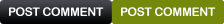
<style>
.page{position:relative;width:224px;height:24px;background:#74890b}
.page>*{position:absolute;margin:0}
.t1{font:12px "ArialRoundedMTBold";letter-spacing:-0.025em;color:#ffffff}
</style>
<div class="page">
<p class="t1" style="left:9px;top:7px;width:95px;height:9px">POST COMMENT</p>
<p class="t1" style="left:121px;top:7px;width:95px;height:9px">POST COMMENT</p>
</div>
